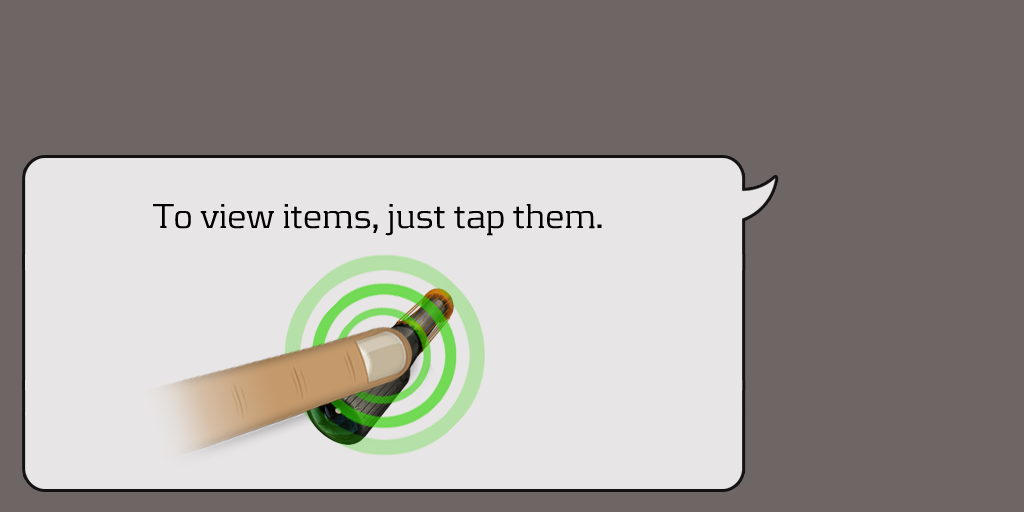
<style>
.page{position:relative;width:1024px;height:512px;background:#6e6665}
.page>*{position:absolute;margin:0}
.t1{font:36px "KontrapunktLight";color:#000000}
</style>
<div class="page">
<p class="t1" style="left:153px;top:204px;width:449px;height:32px">To view items, just tap them.</p>
</div>
